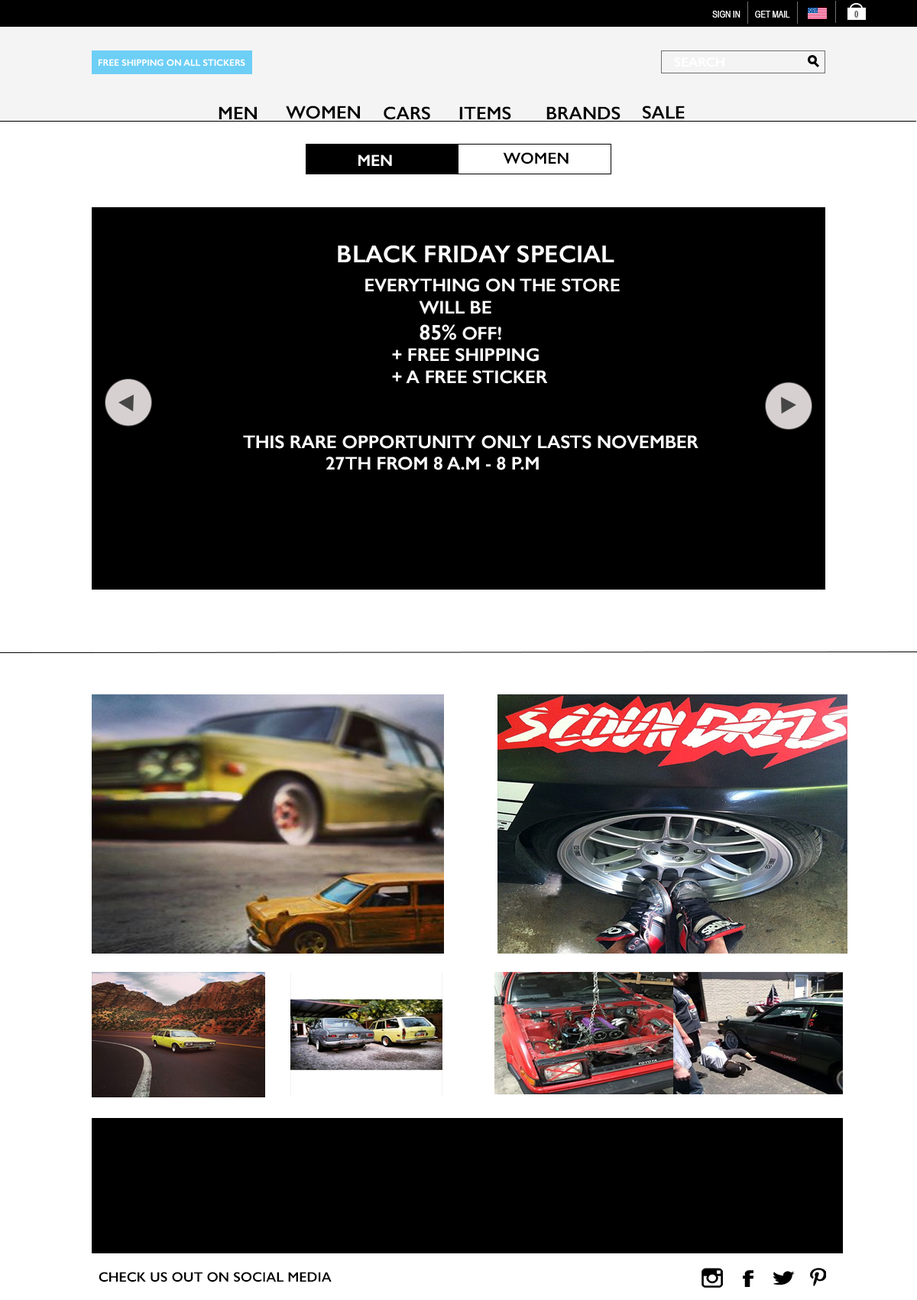
<style>
.page{position:relative;width:917px;height:1300px;background:#ffffff}
.page>*{position:absolute;margin:0}
.t1{font:9.2px "ArialNarrow";color:#ffffff}
.t2{font:9.2px "ArialNarrow-Bold";color:#606060}
.t3{font:9.2px "GillSans-SemiBold";color:#ffffff}
.t4{font:13px "GillSans-SemiBold";color:#ffffff}
.t5{font:18.3px "GillSans-SemiBold";color:#010101}
.t6{font:16.1px "GillSans-SemiBold";color:#ffffff}
.t7{font:16.1px "GillSans-SemiBold";color:#000000}
.t8{font:18.3px "GillSans-SemiBold";color:#fefcfc}
.t9{font:24.5px "GillSans-SemiBold";color:#fefcfc}
.t10{font:21.4px "GillSans-SemiBold";color:#fefcfc}
.t11{font:13.8px "GillSans-SemiBold";color:#010101}
</style>
<div class="page">
<p class="t1" style="left:713px;top:11px;width:28px;height:7px">SIGN IN</p>
<p class="t1" style="left:755px;top:11px;width:36px;height:7px">GET MAIL</p>
<p class="t2" style="left:855px;top:11px;width:4px;height:7px">0</p>
<p class="t3" style="left:98px;top:59px;width:147px;height:8px">FREE SHIPPING ON ALL STICKERS</p>
<p class="t4" style="left:674px;top:57px;width:51px;height:10px">SEARCH</p>
<p class="t5" style="left:219px;top:106px;width:38px;height:13px">MEN</p>
<p class="t5" style="left:286px;top:106px;width:74px;height:13px">WOMEN</p>
<p class="t5" style="left:384px;top:106px;width:46px;height:14px">CARS</p>
<p class="t5" style="left:459px;top:106px;width:52px;height:14px">ITEMS</p>
<p class="t5" style="left:547px;top:106px;width:74px;height:14px">BRANDS</p>
<p class="t5" style="left:643px;top:106px;width:42px;height:13px">SALE</p>
<p class="t6" style="left:359px;top:154px;width:33px;height:12px">MEN</p>
<p class="t7" style="left:503px;top:152px;width:66px;height:12px">WOMEN</p>
<p class="t8" style="left:338px;top:245px;width:282px;height:139px"><span class="t9">BLACK FRIDAY SPECIAL <br> </span>EVERYTHING ON THE STORE<br>   WILL BE<br>   <span class="t10">85%</span> OFF!<br>  + FREE SHIPPING<br>  + A FREE STICKER</p>
<p class="t8" style="left:243px;top:435px;width:456px;height:35px">THIS RARE OPPORTUNITY ONLY LASTS NOVEMBER <br>   27TH FROM 8 A.M - 8 P.M</p>
<p class="t11" style="left:99px;top:1271px;width:233px;height:11px">CHECK US OUT ON SOCIAL MEDIA</p>
</div>
